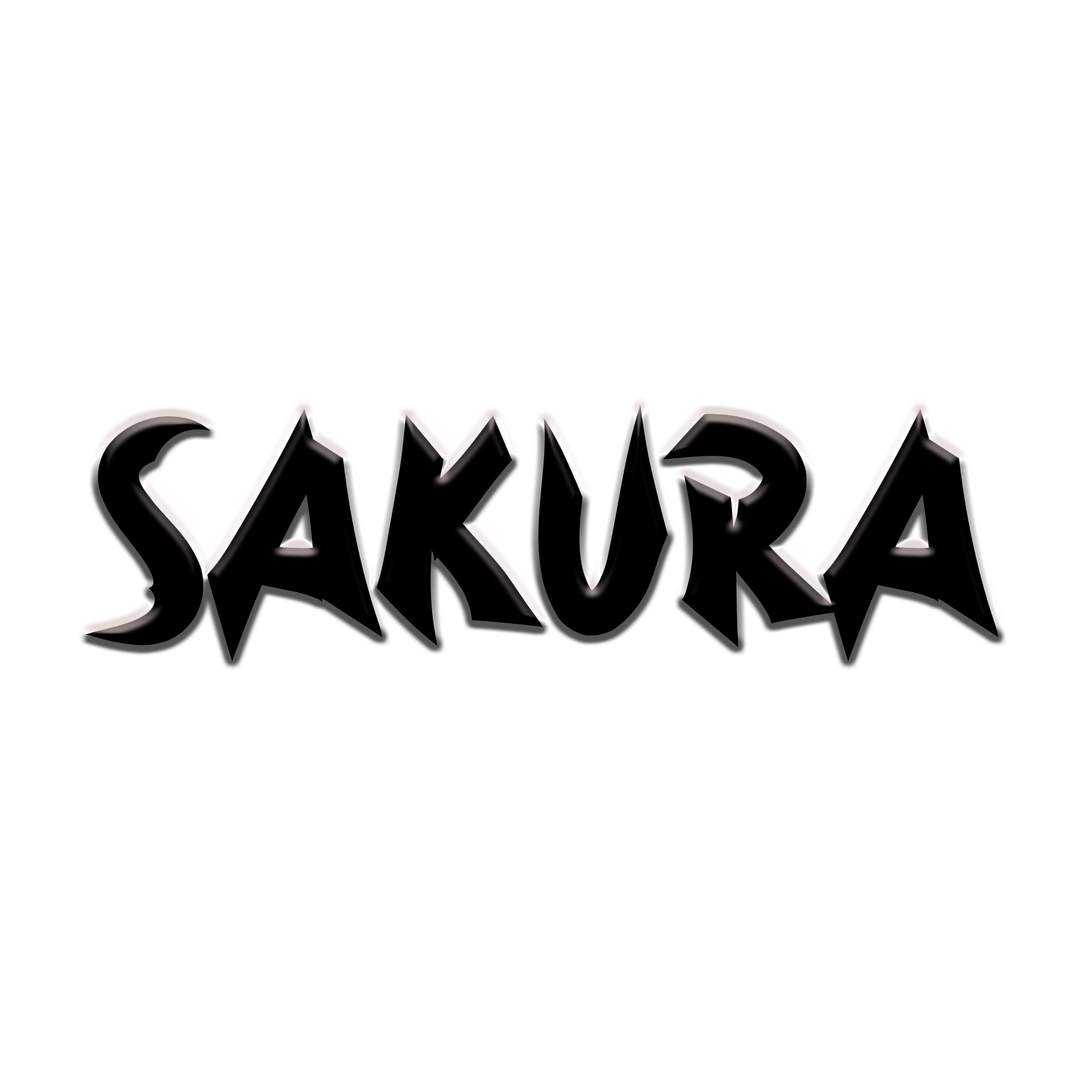
<style>
.page{position:relative;width:1092px;height:1092px;background:#ffffff}
.page>*{position:absolute;margin:0}
.t1{font:304.3px "aAsianNinja";color:#000000}
</style>
<div class="page">
<p class="t1" style="left:86px;top:405px;width:913px;height:256px">Sakura</p>
</div>
